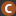
<style>
.page{position:relative;width:16px;height:16px;background:#a05228}
.page>*{position:absolute;margin:0}
.t1{font:12px "MyriadPro-Bold";color:#ffffff}
</style>
<div class="page">
<p class="t1" style="left:5px;top:4px;width:7px;height:9px">C</p>
</div>
